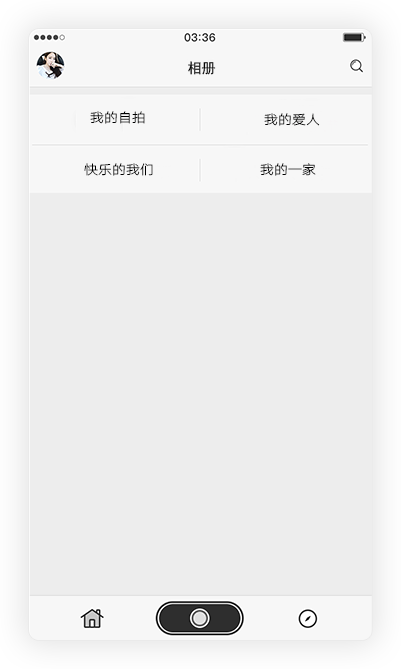
<style>
.page{position:relative;width:401px;height:669px;background:#ededed}
.page>*{position:absolute;margin:0}
.t1{font:14px "SimHei";color:#000000}
.t2{font:14px "HYQiHeiY1-CEW";color:#000000}
</style>
<div class="page">
<p class="t1" style="left:188px;top:61px;width:28px;height:14px">相册</p>
<p class="t2" style="left:90px;top:111px;width:55px;height:13px">我的自拍</p>
<p class="t2" style="left:264px;top:113px;width:56px;height:13px">我的爱人</p>
<p class="t2" style="left:84px;top:163px;width:69px;height:13px">快乐的我们</p>
<p class="t2" style="left:260px;top:163px;width:56px;height:13px">我的一家</p>
</div>
